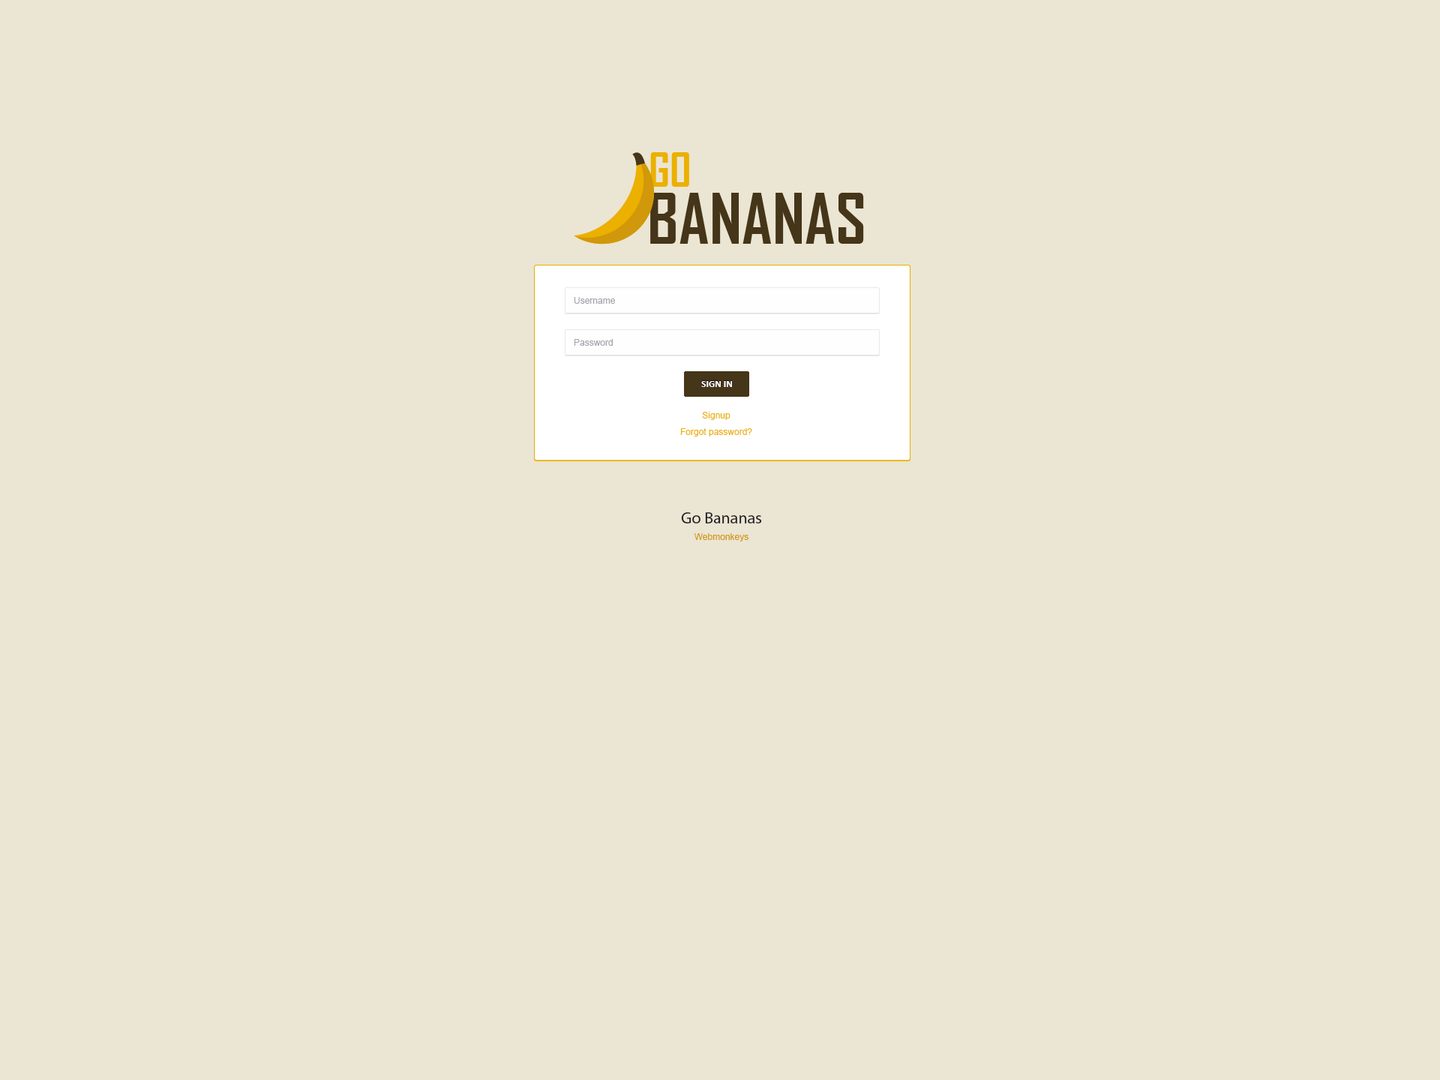
<style>
.page{position:relative;width:1440px;height:1080px;background:#ebe5d3}
.page>*{position:absolute;margin:0}
.t1{font:9px "ArialMT";color:#a3a6af}
.t2{font:9.8px "Calibri-Bold";color:#ffffff}
.t3{font:9px/16.5px "ArialMT";color:#ebb000}
.t4{font:16.5px "MyriadPro-Regular";color:#1f2025}
.t5{font:9px/16.5px "ArialMT";color:#d1980b}
</style>
<div class="page">
<p class="t1" style="left:574px;top:297px;width:41px;height:7px">Username</p>
<p class="t1" style="left:574px;top:339px;width:39px;height:7px">Password</p>
<p class="t2" style="left:701px;top:381px;width:31px;height:6px">SIGN IN</p>
<p class="t3" style="left:680px;top:412px;width:72px;height:24px;text-align:center">Signup<br>Forgot password?</p>
<p class="t4" style="left:681px;top:512px;width:81px;height:30px;text-align:center">Go Bananas<br><span class="t5">Webmonkeys</span></p>
</div>
